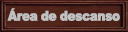
<style>
.page{position:relative;width:128px;height:32px}
.page>*{position:absolute;margin:0}
.t1{font:13.3px "Arial-Black";letter-spacing:-0.05em;color:#c0c0c0;font-weight:bold;scale:0.89 1}
</style>
<div class="page">
<p class="t1" style="left:7px;top:8px;width:113px;height:13px">Área de descanso</p>
</div>
